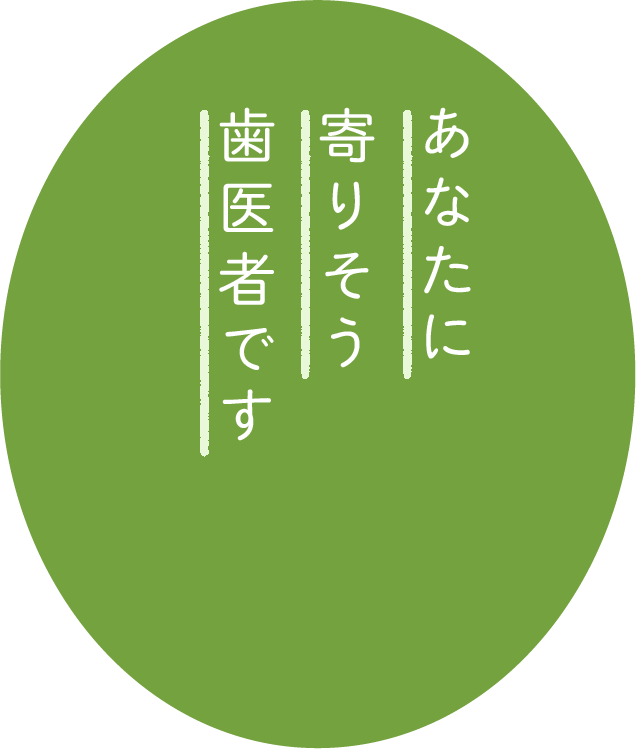
<style>
.page{position:relative;width:636px;height:749px;background:#74a23e}
.page>*{position:absolute;margin:0}
.t1{font:60px/100px "TBChibiRGoPlusKPro-Regular";letter-spacing:0.2em;color:#ffffff}
</style>
<div class="page">
<p class="t1" style="left:219px;top:107px;width:252px;height:334px">あなたに<br>寄りそう<br>歯医者です</p>
</div>
